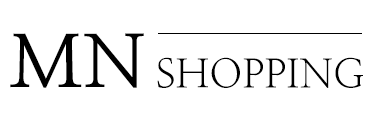
<style>
.page{position:relative;width:381px;height:122px;background:#ffffff}
.page>*{position:absolute;margin:0}
.t1{font:73px "NanumMyeongjoBold";color:#000000}
.t2{font:39.7px "NanumMyeongjo";color:#000000}
</style>
<div class="page">
<p class="t1" style="left:10px;top:33px;width:134px;height:55px">MN</p>
<p class="t2" style="left:157px;top:57px;width:206px;height:31px">SHOPPING</p>
</div>
